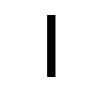
<style>
.page{position:relative;width:100px;height:100px;background:#ffffff}
.page>*{position:absolute;margin:0}
.t1{font:100px "TwCenMT-Condensed";color:#000000}
</style>
<div class="page">
<p class="t1" style="left:47px;top:15px;width:9px;height:62px">I</p>
</div>
